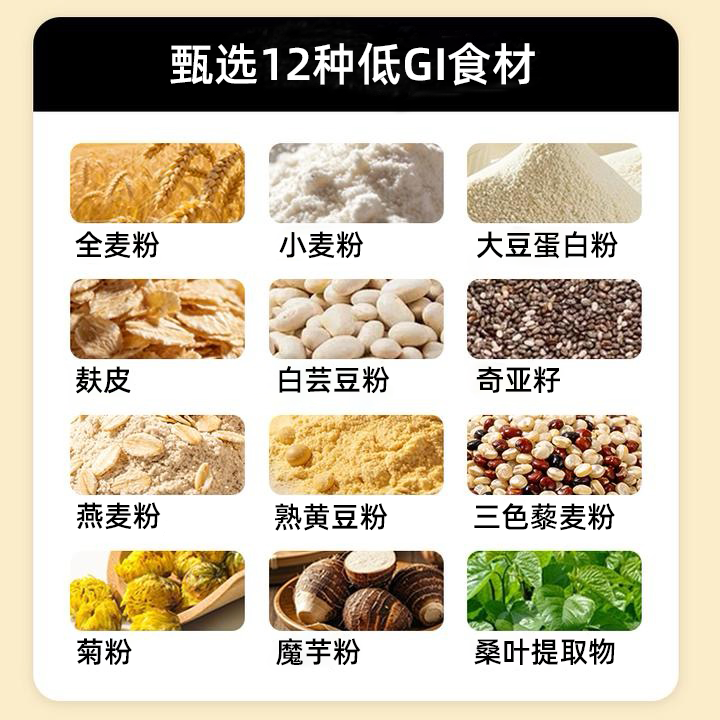
<style>
.page{position:relative;width:720px;height:720px;background:#ffffff}
.page>*{position:absolute;margin:0}
.t1{font:45.6px "AlibabaPuHuiTi-Medium";color:#ffffff}
.t2{font:29.1px "AlibabaPuHuiTi-Medium";color:#000000}
</style>
<div class="page">
<p class="t1" style="left:170px;top:42px;width:365px;height:44px">甄选12种低GI食材</p>
<p class="t2" style="left:75px;top:231px;width:85px;height:28px">全麦粉</p>
<p class="t2" style="left:279px;top:231px;width:85px;height:28px">小麦粉</p>
<p class="t2" style="left:477px;top:231px;width:141px;height:28px">大豆蛋白粉</p>
<p class="t2" style="left:76px;top:366px;width:55px;height:28px">麸皮</p>
<p class="t2" style="left:279px;top:366px;width:111px;height:28px">白芸豆粉</p>
<p class="t2" style="left:476px;top:366px;width:84px;height:27px">奇亚籽</p>
<p class="t2" style="left:76px;top:502px;width:85px;height:28px">燕麦粉</p>
<p class="t2" style="left:275px;top:503px;width:113px;height:28px">熟黄豆粉</p>
<p class="t2" style="left:474px;top:502px;width:141px;height:29px">三色藜麦粉</p>
<p class="t2" style="left:77px;top:638px;width:55px;height:28px">菊粉</p>
<p class="t2" style="left:276px;top:638px;width:85px;height:28px">魔芋粉</p>
<p class="t2" style="left:474px;top:638px;width:141px;height:28px">桑叶提取物</p>
</div>
